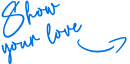
<style>
.page{position:relative;width:130px;height:64px;background:#ffffff}
.page>*{position:absolute;margin:0}
.t1{font:32.3px/26.1px "Ballpen";color:#0072e5;font-weight:bold}
.t2{font:32.3px "Ballpen";color:#0072e5;font-weight:bold}
</style>
<div class="page">
<p class="t1" style="left:1px;top:0px;width:81px;height:64px;text-align:center;rotate:-16deg">Show <br>your love</p>
<p class="t2" style="left:77px;top:39px;width:38px;height:14px;rotate:98deg">)</p>
<p class="t2" style="left:108px;top:37px;width:19px;height:16px;rotate:147deg">&lt;</p>
</div>
